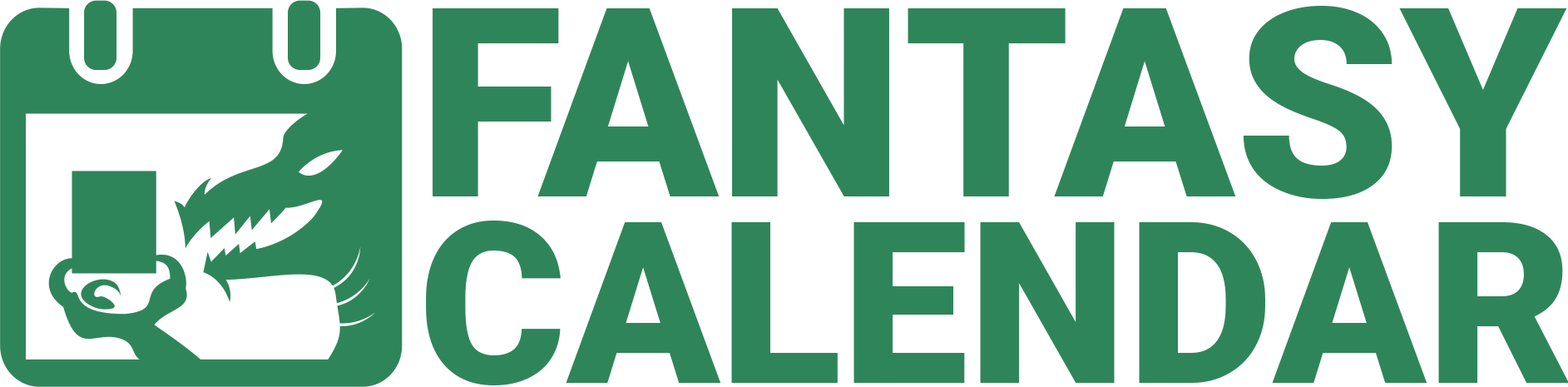
<style>
.page{position:relative;width:1568px;height:387px;background:#ffffff}
.page>*{position:absolute;margin:0}
.t1{font:225.6px/186.8px "Roboto-Black";color:#2f855a}
.t2{font:264.4px/179.8px "Roboto-Black";color:#2f855a}
</style>
<div class="page">
<p class="t1" style="left:426px;top:6px;width:1142px;height:379px"><span class="t2">FANTASY<br></span>CALENDAR</p>
</div>
